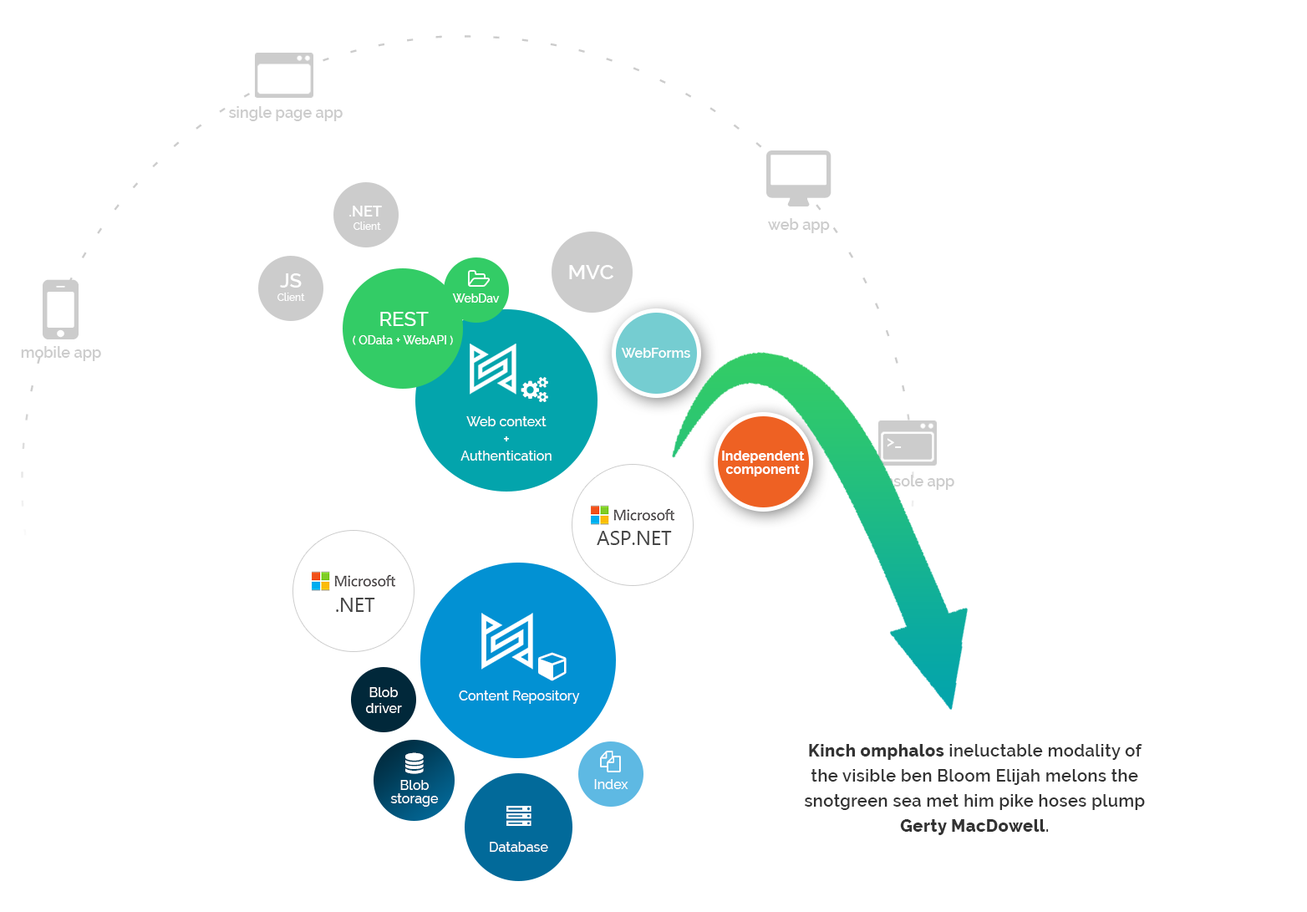
<style>
.page{position:relative;width:1307px;height:912px;background:#ffffff}
.page>*{position:absolute;margin:0}
.t1{font:15px "Raleway-SemiBold";color:#cccccc}
.t2{font:10px/13.4px "Raleway-Medium";color:#ffffff}
.t3{font:15px/13.4px "Raleway-SemiBold";color:#ffffff}
.t4{font:20.9px "Raleway-SemiBold";color:#ffffff}
.t5{font:20.1px/13.4px "Raleway-SemiBold";color:#ffffff}
.t6{font:11.7px "Raleway-Medium";color:#ffffff}
.t7{font:20.1px "Raleway-Medium";color:#ffffff}
.t8{font:13.4px "Raleway-SemiBold";color:#ffffff}
.t9{font:13.4px "Raleway-Medium";color:#ffffff}
.t10{font:15px "Raleway-Medium";color:#ffffff}
.t11{font:15px "Raleway-SemiBold";color:#ffffff}
.t12{font:13.4px/13.4px "Raleway-Bold";color:#ffffff}
.t13{font:20.1px "SegoeUI";color:#444444}
.t14{font:16.7px/25.1px "Raleway-SemiBold";letter-spacing:0.025em;color:#333333}
.t15{font:16.7px/25.1px "Raleway-ExtraBold";letter-spacing:0.025em;color:#333333}
.t16{font:13.4px/13.4px "Raleway-Medium";color:#ffffff}
</style>
<div class="page">
<p class="t1" style="left:229px;top:106px;width:114px;height:15px">single page app</p>
<p class="t2" style="left:349px;top:206px;width:33px;height:24px;text-align:center"><span class="t3">.NET <br></span>Client</p>
<p class="t1" style="left:768px;top:218px;width:62px;height:15px">web app</p>
<p class="t4" style="left:569px;top:265px;width:45px;height:14px">MVC</p>
<p class="t2" style="left:278px;top:273px;width:27px;height:28px;text-align:center"><span class="t5">JS<br></span>Client</p>
<p class="t6" style="left:452px;top:293px;width:48px;height:10px">WebDav</p>
<p class="t7" style="left:380px;top:312px;width:49px;height:14px">REST</p>
<p class="t6" style="left:353px;top:335px;width:100px;height:10px">( OData + WebAPI )</p>
<p class="t1" style="left:21px;top:346px;width:80px;height:15px">mobile app</p>
<p class="t8" style="left:621px;top:348px;width:70px;height:10px">WebForms</p>
<p class="t9" style="left:461px;top:416px;width:91px;height:45px;text-align:center">Web context<br><span class="t10">+<br></span>Authentication</p>
<p class="t11" style="left:887px;top:438px;width:15px;height:10px">&gt;_</p>
<p class="t12" style="left:722px;top:451px;width:83px;height:25px;text-align:center">Independent<br>component</p>
<p class="t1" style="left:868px;top:475px;width:87px;height:15px">console app</p>
<p class="t13" style="left:597px;top:531px;width:75px;height:14px">ASP.NET</p>
<p class="t13" style="left:336px;top:598px;width:39px;height:14px">.NET</p>
<p class="t9" style="left:366px;top:687px;width:36px;height:26px;text-align:center">Blob<br>driver</p>
<p class="t9" style="left:459px;top:691px;width:121px;height:13px">Content Repository</p>
<p class="t14" style="left:805px;top:744px;width:340px;height:91px;text-align:center"><span class="t15">Kinch omphalos</span> ineluctable modality of the visible ben Bloom Elijah melons the snotgreen sea met him pike hoses plump <span class="t15">Gerty MacDowell</span>.</p>
<p class="t16" style="left:390px;top:780px;width:49px;height:27px;text-align:center">Blob storage</p>
<p class="t9" style="left:594px;top:779px;width:35px;height:10px">Index</p>
<p class="t9" style="left:490px;top:842px;width:58px;height:10px">Database</p>
</div>
